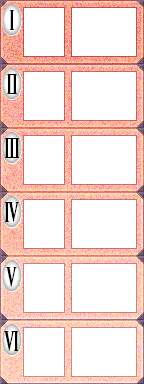
<style>
.page{position:relative;width:144px;height:384px;background:#ffffff}
.page>*{position:absolute;margin:0}
.t1{font:30.8px "TrajanPro3-Bold";letter-spacing:-0.08em;color:#000000;scale:0.45 1}
.t2{font:30.8px "TrajanPro3-Bold";letter-spacing:-0.12em;color:#000000;scale:0.45 1}
</style>
<div class="page">
<p class="t1" style="left:9px;top:10px;width:6px;height:20px">i</p>
<p class="t1" style="left:7px;top:74px;width:11px;height:20px">ii</p>
<p class="t1" style="left:4px;top:138px;width:16px;height:20px">iii</p>
<p class="t2" style="left:4px;top:202px;width:15px;height:20px">iv</p>
<p class="t1" style="left:6px;top:267px;width:11px;height:20px">v</p>
<p class="t1" style="left:4px;top:331px;width:15px;height:20px">vi</p>
</div>
